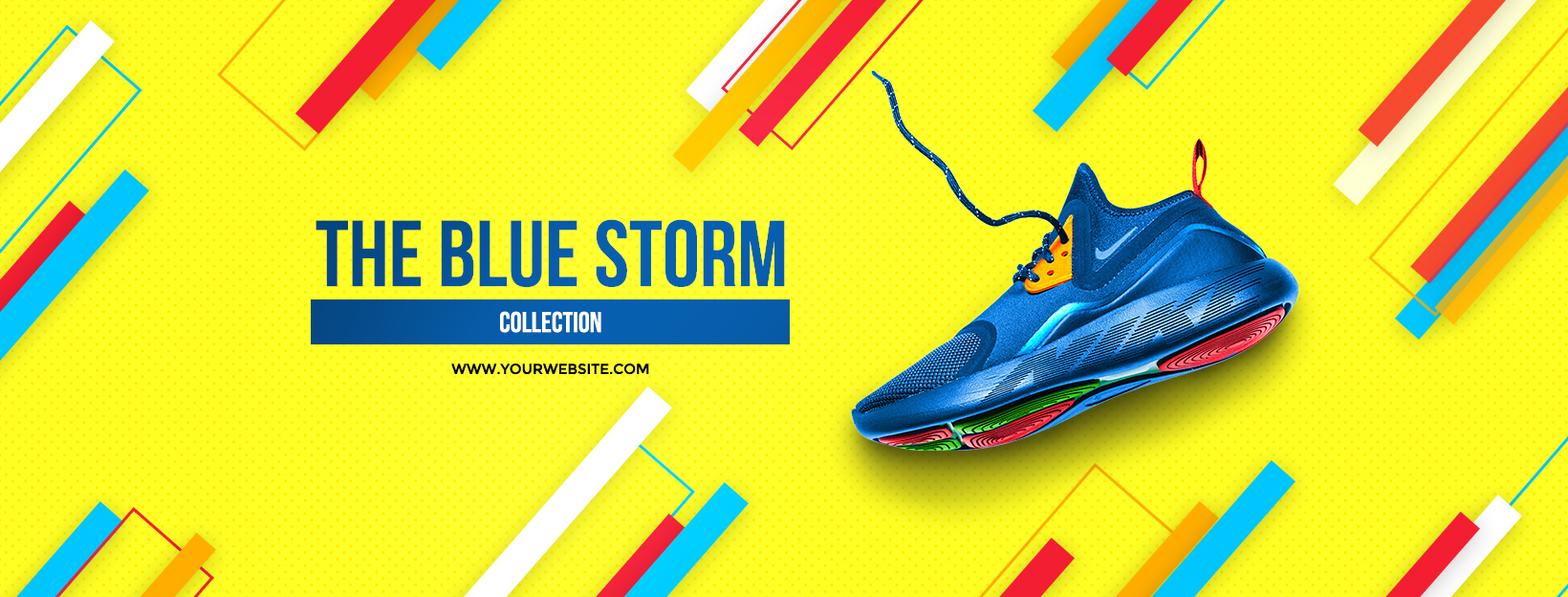
<style>
.page{position:relative;width:1568px;height:597px}
.page>*{position:absolute;margin:0}
.t1{font:93.8px "BebasNeueBold";color:#075daa}
.t2{font:28.7px "BebasNeueBold";color:#ffffff}
.t3{font:14.3px "Montserrat-Regular";color:#000000}
</style>
<div class="page">
<p class="t1" style="left:316px;top:219px;width:469px;height:69px">The bLUE STORM</p>
<p class="t2" style="left:500px;top:311px;width:101px;height:22px">collection</p>
<p class="t3" style="left:451px;top:363px;width:198px;height:11px">WWW.YOURWEBSITE.COM</p>
</div>
